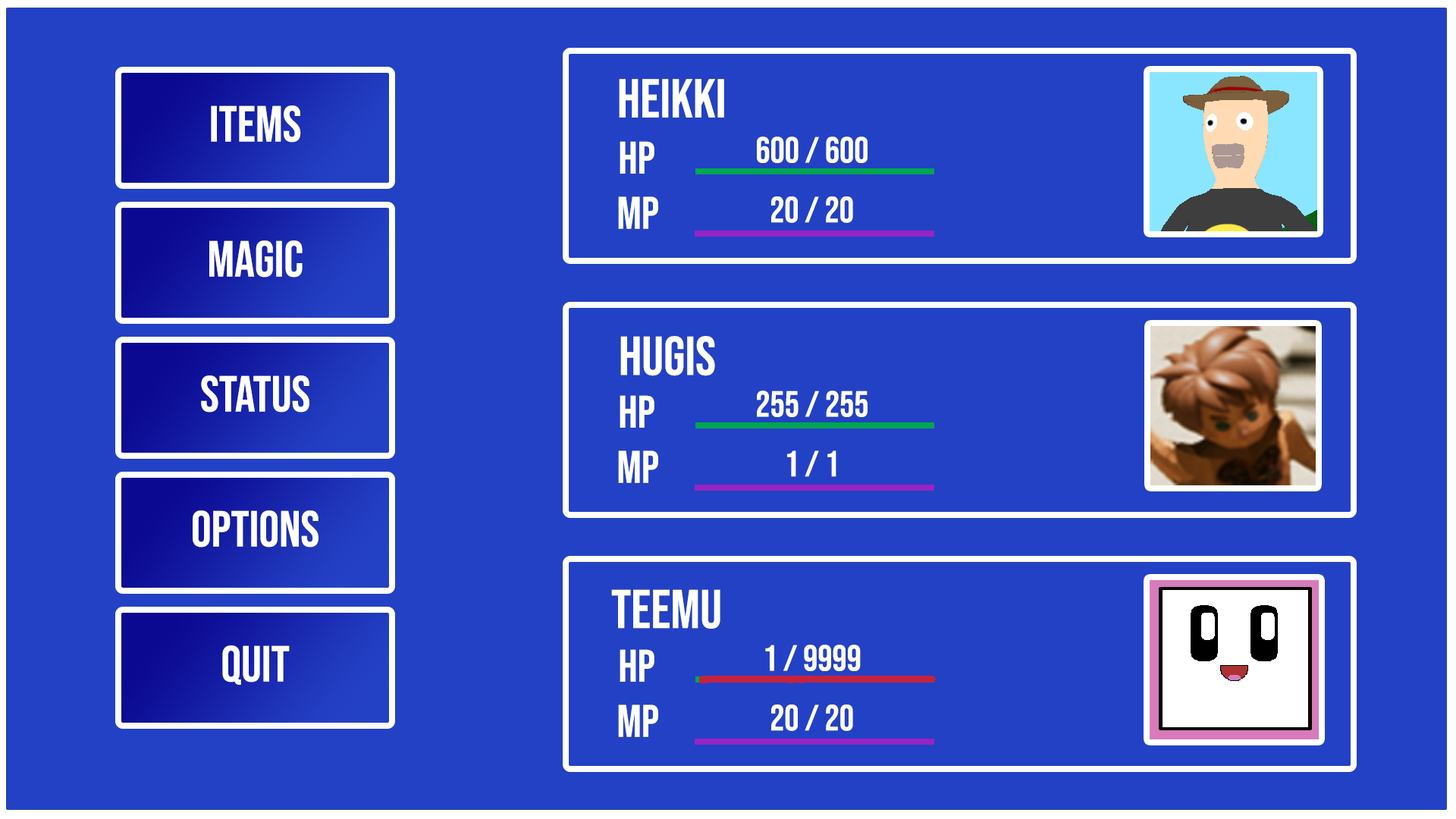
<style>
.page{position:relative;width:1456px;height:819px;background:#2341c4}
.page>*{position:absolute;margin:0}
.t1{font:54.6px "BebasNeue-Regular";color:#ffffff}
.t2{font:50.5px "BebasNeue-Regular";color:#ffffff}
.t3{font:36.4px "BebasNeue-Regular";color:#ffffff}
.t4{font:45.5px "BebasNeue-Regular";color:#ffffff}
</style>
<div class="page">
<p class="t1" style="left:619px;top:79px;width:105px;height:39px">Heikki</p>
<p class="t2" style="left:211px;top:105px;width:90px;height:38px">Items</p>
<p class="t3" style="left:757px;top:136px;width:111px;height:27px">600 / 600</p>
<p class="t4" style="left:620px;top:141px;width:34px;height:33px">hp</p>
<p class="t4" style="left:618px;top:196px;width:40px;height:33px">MP</p>
<p class="t3" style="left:771px;top:196px;width:82px;height:27px">20 / 20</p>
<p class="t2" style="left:209px;top:240px;width:94px;height:38px">Magic</p>
<p class="t1" style="left:620px;top:336px;width:95px;height:40px">Hugis</p>
<p class="t2" style="left:201px;top:375px;width:108px;height:38px">Status</p>
<p class="t4" style="left:620px;top:395px;width:34px;height:33px">hp</p>
<p class="t3" style="left:757px;top:391px;width:111px;height:26px">255 / 255</p>
<p class="t4" style="left:618px;top:450px;width:40px;height:33px">MP</p>
<p class="t3" style="left:787px;top:450px;width:49px;height:27px">1 / 1</p>
<p class="t2" style="left:193px;top:510px;width:125px;height:38px">Options</p>
<p class="t1" style="left:611px;top:589px;width:109px;height:40px">Teemu</p>
<p class="t2" style="left:222px;top:645px;width:68px;height:40px">Quit</p>
<p class="t4" style="left:620px;top:649px;width:34px;height:33px">hp</p>
<p class="t3" style="left:765px;top:645px;width:96px;height:26px">1 / 9999</p>
<p class="t4" style="left:618px;top:704px;width:40px;height:33px">MP</p>
<p class="t3" style="left:771px;top:704px;width:82px;height:27px">20 / 20</p>
</div>
